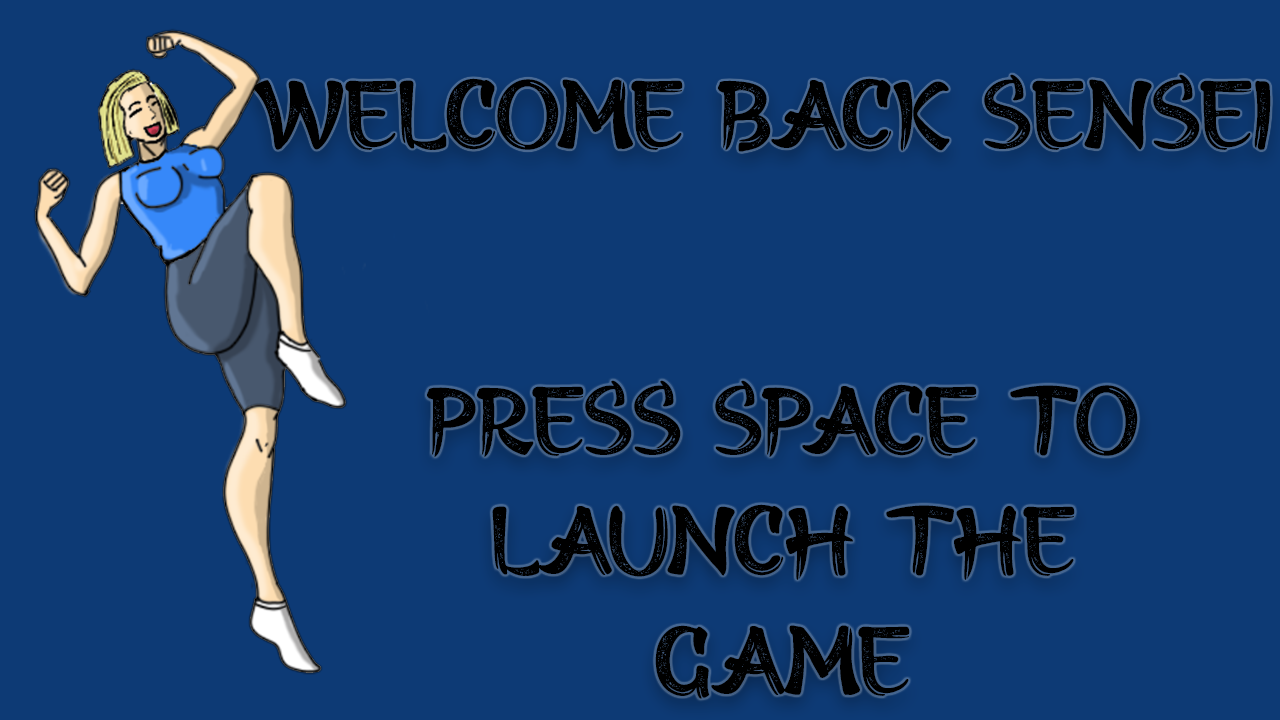
<style>
.page{position:relative;width:1280px;height:720px;background:#0d3a75}
.page>*{position:absolute;margin:0}
.t1{font:100px "HIROMISAKERegular";color:#000000}
</style>
<div class="page">
<p class="t1" style="left:253px;top:74px;width:1018px;height:78px">Welcome back sensei</p>
<p class="t1" style="left:427px;top:380px;width:711px;height:319px;text-align:center">Press space to launch the game</p>
</div>
